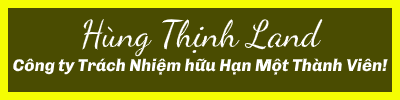
<style>
.page{position:relative;width:400px;height:100px;background:#4a4c01}
.page>*{position:absolute;margin:0}
.t1{font:37px "DancingScript-Regular";color:#ffffff}
.t2{font:17px "Chivo-ExtraBoldItalic";color:#ffffff}
</style>
<div class="page">
<p class="t1" style="left:82px;top:19px;width:241px;height:38px">Hùng Thịnh Land</p>
<p class="t2" style="left:13px;top:58px;width:375px;height:17px">Công ty Trách Nhiệm hữu Hạn Một Thành Viên!</p>
</div>
